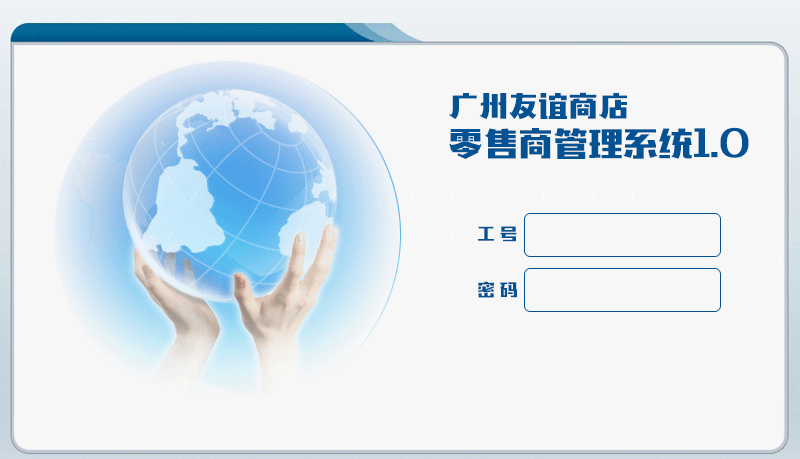
<style>
.page{position:relative;width:800px;height:459px;background:#f7f7f7}
.page>*{position:absolute;margin:0}
.t1{font:30px "MF-MoDeng-Noncommercial-Regular";color:#035293}
.t2{font:35px "MF-MoDeng-Noncommercial-Regular";color:#035293}
.t3{font:18px "MF-MoDeng-Noncommercial-Regular";color:#035293}
</style>
<div class="page">
<p class="t1" style="left:449px;top:92px;width:178px;height:28px">广州友谊商店</p>
<p class="t2" style="left:449px;top:127px;width:300px;height:32px">零售商管理系统1.0</p>
<p class="t3" style="left:478px;top:226px;width:39px;height:16px">工 号</p>
<p class="t3" style="left:478px;top:281px;width:39px;height:17px">密 码</p>
</div>
